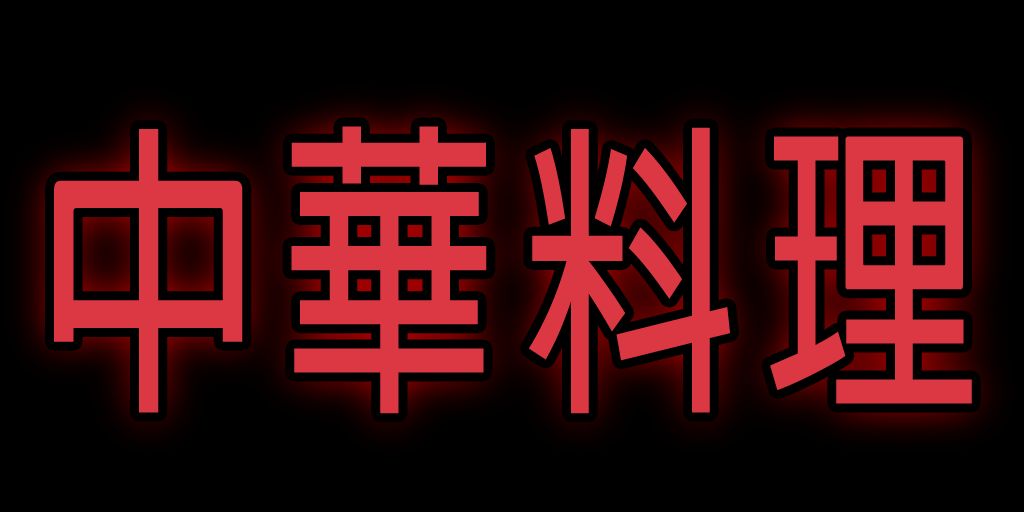
<style>
.page{position:relative;width:1024px;height:512px;background:#000000}
.page>*{position:absolute;margin:0}
.t1{font:308.1px "AdobeFanHeitiStd-Bold";letter-spacing:0.12em;color:#dc3844;scale:0.7 1}
</style>
<div class="page">
<p class="t1" style="left:54px;top:126px;width:918px;height:288px">中華料理</p>
</div>
